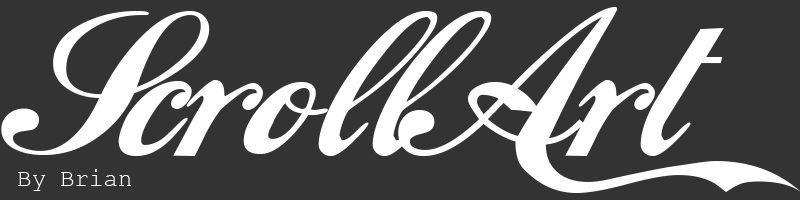
<style>
.page{position:relative;width:800px;height:200px;background:#333333}
.page>*{position:absolute;margin:0}
.t1{font:188.7px "LokiCola";color:#ffffff;scale:1.14 1}
.t2{font:24px "CourierNewPSMT";color:#ffffff}
</style>
<div class="page">
<p class="t1" style="left:1px;top:7px;width:800px;height:186px">Scroll Art</p>
<p class="t2" style="left:18px;top:169px;width:114px;height:22px">By Brian</p>
</div>
